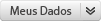
<style>
.page{position:relative;width:101px;height:21px}
.page>*{position:absolute;margin:0}
.t1{font:12px "MyriadPro-Regular";color:#474646}
</style>
<div class="page">
<p class="t1" style="left:10px;top:6px;width:62px;height:9px">Meus Dados</p>
</div>
